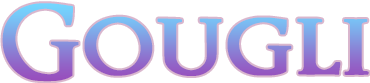
<style>
.page{position:relative;width:370px;height:83px;background:#ffffff}
.page>*{position:absolute;margin:0}
.t1{font:100px "OptimusPrincepsSemiBold";font-weight:bold}
</style>
<div class="page">
<p class="t1" style="left:2px;top:3px;width:367px;height:79px">Gougli</p>
</div>
